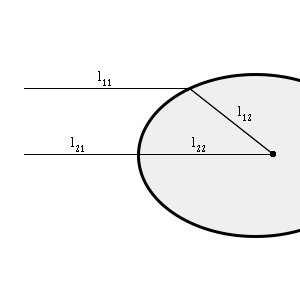
<style>
.page{position:relative;width:300px;height:300px;background:#ffffff}
.page>*{position:absolute;margin:0}
.t1{font:15px "CambriaMath";color:#000000}
</style>
<div class="page">
<p class="t1" style="left:98px;top:71px;width:13px;height:15px">l11</p>
<p class="t1" style="left:238px;top:106px;width:13px;height:15px">l12</p>
<p class="t1" style="left:71px;top:137px;width:13px;height:15px">l21</p>
<p class="t1" style="left:192px;top:137px;width:13px;height:15px">l22</p>
</div>
